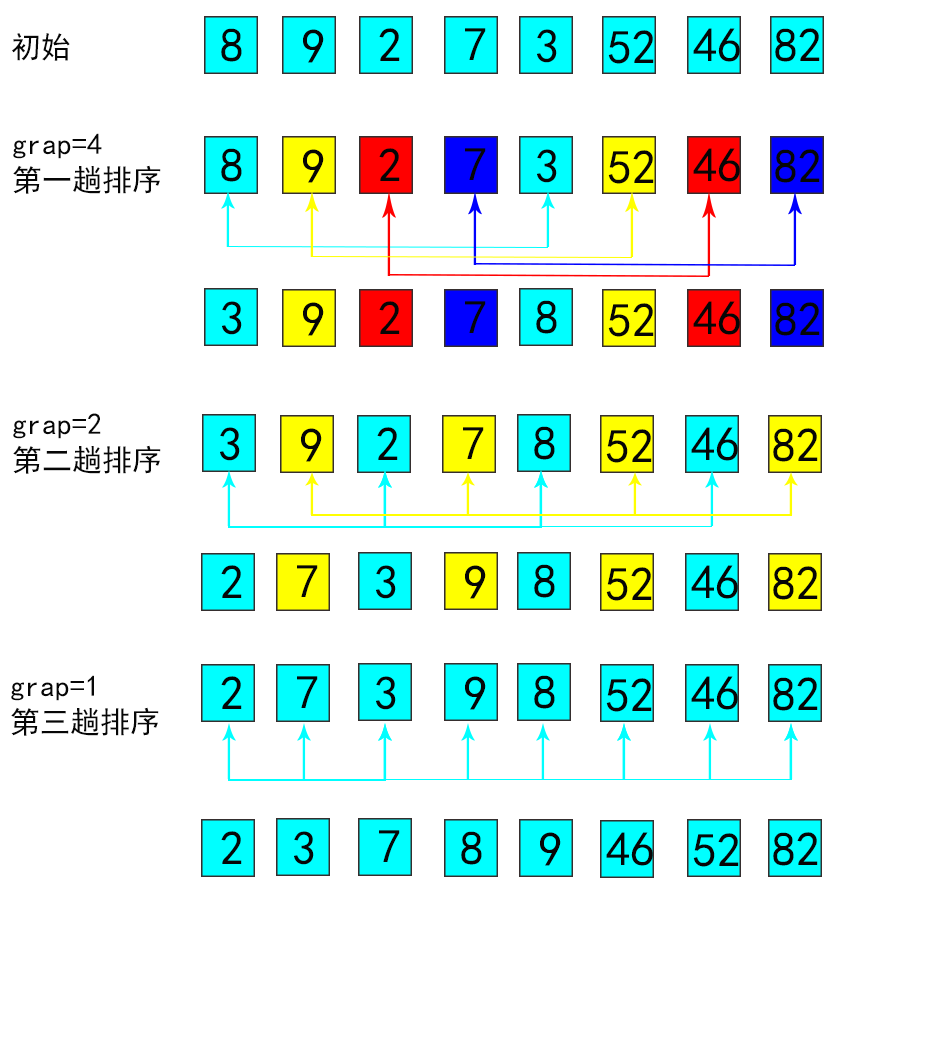
<style>
.page{position:relative;width:927px;height:1056px;background:#ffffff}
.page>*{position:absolute;margin:0}
.t1{font:48px "SimHei";color:#060606}
.t2{font:30px "SimHei";color:#060606}
</style>
<div class="page">
<p class="t1" style="left:221px;top:28px;width:21px;height:34px">8</p>
<p class="t1" style="left:303px;top:29px;width:21px;height:34px">9</p>
<p class="t1" style="left:379px;top:28px;width:21px;height:33px">2</p>
<p class="t1" style="left:465px;top:28px;width:21px;height:32px">7</p>
<p class="t1" style="left:537px;top:29px;width:20px;height:34px">3</p>
<p class="t1" style="left:608px;top:30px;width:46px;height:34px">52</p>
<p class="t1" style="left:693px;top:28px;width:47px;height:34px">46</p>
<p class="t1" style="left:775px;top:28px;width:45px;height:34px">82</p>
<p class="t2" style="left:12px;top:33px;width:58px;height:28px">初始</p>
<p class="t2" style="left:13px;top:133px;width:148px;height:61px">grap=4<br>第一趟排序</p>
<p class="t1" style="left:221px;top:148px;width:21px;height:34px">8</p>
<p class="t1" style="left:303px;top:149px;width:21px;height:34px">9</p>
<p class="t1" style="left:379px;top:148px;width:21px;height:33px">2</p>
<p class="t1" style="left:465px;top:148px;width:21px;height:32px">7</p>
<p class="t1" style="left:537px;top:149px;width:20px;height:34px">3</p>
<p class="t1" style="left:608px;top:150px;width:46px;height:34px">52</p>
<p class="t1" style="left:693px;top:148px;width:47px;height:34px">46</p>
<p class="t1" style="left:775px;top:149px;width:45px;height:34px">82</p>
<p class="t1" style="left:222px;top:301px;width:20px;height:34px">3</p>
<p class="t1" style="left:303px;top:302px;width:21px;height:34px">9</p>
<p class="t1" style="left:379px;top:301px;width:21px;height:33px">2</p>
<p class="t1" style="left:465px;top:301px;width:21px;height:32px">7</p>
<p class="t1" style="left:536px;top:300px;width:21px;height:34px">8</p>
<p class="t1" style="left:608px;top:303px;width:46px;height:34px">52</p>
<p class="t1" style="left:693px;top:301px;width:47px;height:34px">46</p>
<p class="t1" style="left:775px;top:302px;width:45px;height:34px">82</p>
<p class="t2" style="left:13px;top:413px;width:148px;height:61px">grap=2<br>第二趟排序</p>
<p class="t1" style="left:220px;top:427px;width:20px;height:34px">3</p>
<p class="t1" style="left:301px;top:428px;width:21px;height:34px">9</p>
<p class="t1" style="left:377px;top:427px;width:21px;height:33px">2</p>
<p class="t1" style="left:463px;top:427px;width:21px;height:32px">7</p>
<p class="t1" style="left:534px;top:426px;width:21px;height:34px">8</p>
<p class="t1" style="left:606px;top:429px;width:46px;height:34px">52</p>
<p class="t1" style="left:691px;top:427px;width:47px;height:34px">46</p>
<p class="t1" style="left:773px;top:428px;width:45px;height:34px">82</p>
<p class="t1" style="left:221px;top:565px;width:21px;height:33px">2</p>
<p class="t1" style="left:297px;top:565px;width:21px;height:32px">7</p>
<p class="t1" style="left:376px;top:565px;width:20px;height:34px">3</p>
<p class="t1" style="left:465px;top:565px;width:21px;height:34px">9</p>
<p class="t1" style="left:534px;top:564px;width:21px;height:34px">8</p>
<p class="t1" style="left:606px;top:567px;width:46px;height:34px">52</p>
<p class="t1" style="left:691px;top:565px;width:47px;height:34px">46</p>
<p class="t1" style="left:773px;top:566px;width:45px;height:34px">82</p>
<p class="t2" style="left:11px;top:675px;width:148px;height:61px">grap=1<br>第三趟排序</p>
<p class="t1" style="left:221px;top:676px;width:21px;height:33px">2</p>
<p class="t1" style="left:297px;top:676px;width:21px;height:32px">7</p>
<p class="t1" style="left:376px;top:676px;width:20px;height:34px">3</p>
<p class="t1" style="left:465px;top:676px;width:21px;height:34px">9</p>
<p class="t1" style="left:534px;top:675px;width:21px;height:34px">8</p>
<p class="t1" style="left:606px;top:678px;width:46px;height:34px">52</p>
<p class="t1" style="left:691px;top:676px;width:47px;height:34px">46</p>
<p class="t1" style="left:773px;top:677px;width:45px;height:34px">82</p>
<p class="t1" style="left:221px;top:831px;width:21px;height:33px">2</p>
<p class="t1" style="left:294px;top:831px;width:20px;height:34px">3</p>
<p class="t1" style="left:379px;top:830px;width:21px;height:32px">7</p>
<p class="t1" style="left:461px;top:831px;width:21px;height:34px">8</p>
<p class="t1" style="left:540px;top:832px;width:21px;height:34px">9</p>
<p class="t1" style="left:606px;top:832px;width:47px;height:34px">46</p>
<p class="t1" style="left:693px;top:833px;width:46px;height:34px">52</p>
<p class="t1" style="left:773px;top:832px;width:45px;height:34px">82</p>
</div>
